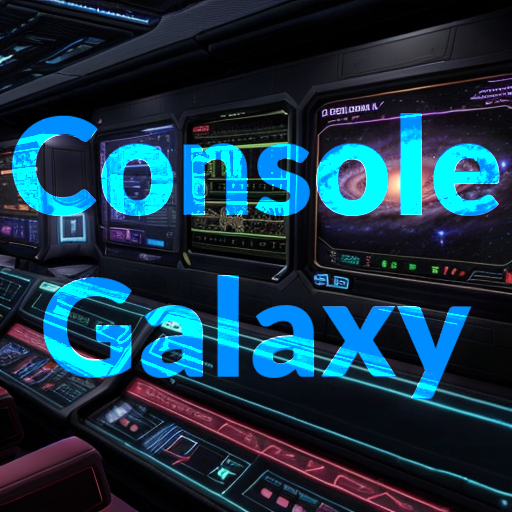
<style>
.page{position:relative;width:512px;height:512px}
.page>*{position:absolute;margin:0}
.t1{font:134.6px "Lato-Black"}
</style>
<div class="page">
<p class="t1" style="left:12px;top:114px;width:488px;height:284px;text-align:center">Console<br>Galaxy</p>
<p class="t1" style="left:12px;top:114px;width:488px;height:284px;text-align:center">Console<br>Galaxy</p>
<p class="t1" style="left:12px;top:114px;width:488px;height:284px;text-align:center">Console<br>Galaxy</p>
</div>
